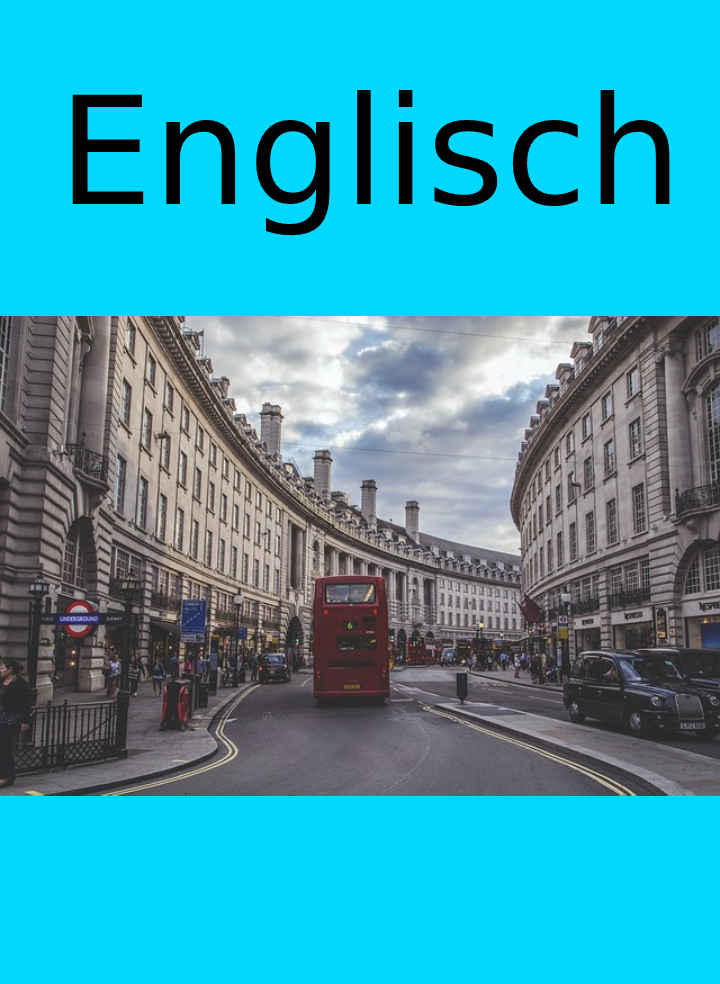
<style>
.page{position:relative;width:720px;height:984px;background:#00d8ff}
.page>*{position:absolute;margin:0}
.t1{font:150px "DejaVuSans";color:#000000}
</style>
<div class="page">
<p class="t1" style="left:72px;top:90px;width:598px;height:146px">Englisch</p>
</div>
